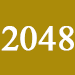
<style>
.page{position:relative;width:75px;height:75px;background:#ab8b09}
.page>*{position:absolute;margin:0}
.t1{font:36px "TimesNewRomanPSMT";color:#ffffff;font-weight:bold}
</style>
<div class="page">
<p class="t1" style="left:1px;top:26px;width:73px;height:25px">2048</p>
</div>
